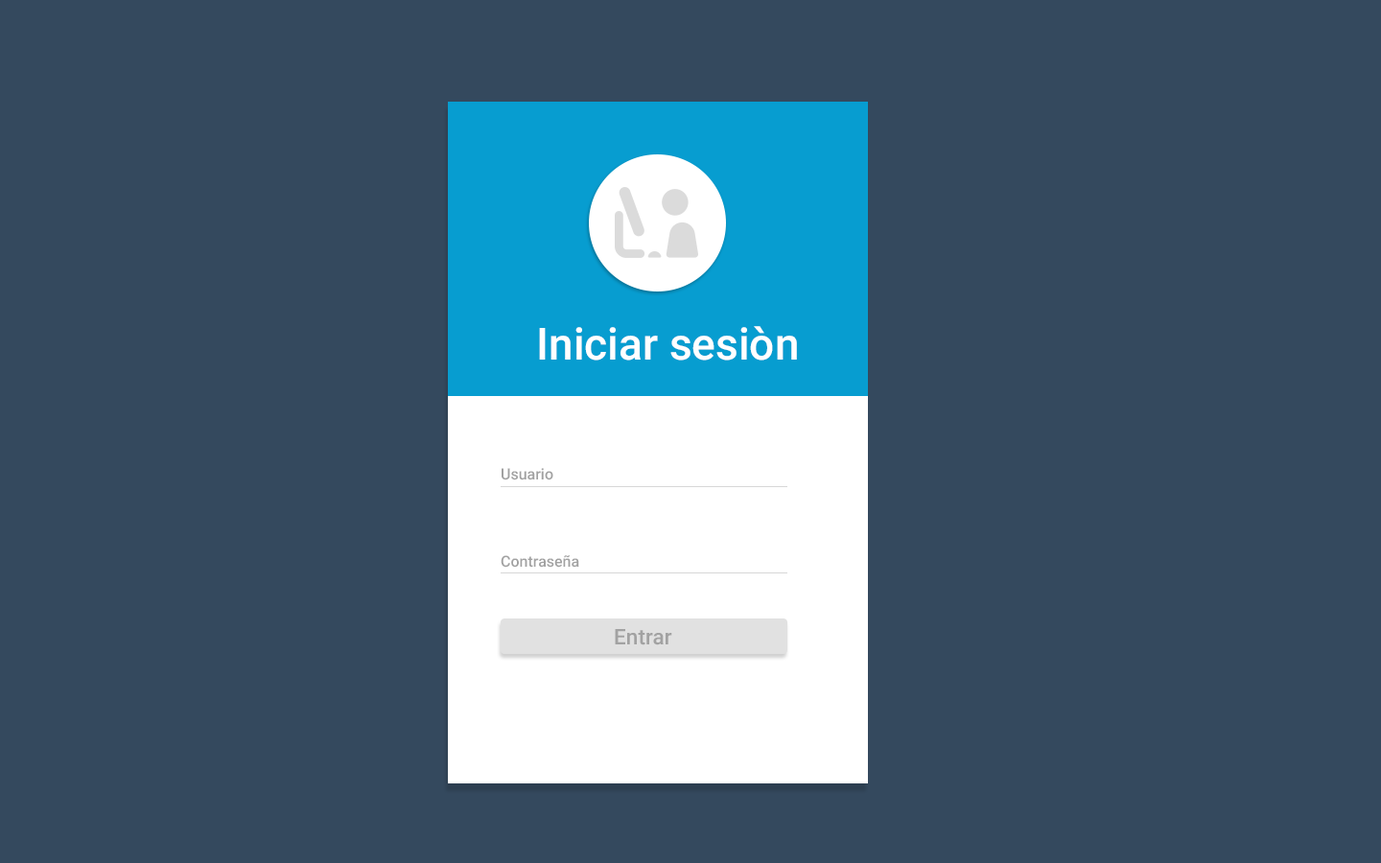
<style>
.page{position:relative;width:1381px;height:863px;background:#34495e}
.page>*{position:absolute;margin:0}
.t1{font:44.3px "Roboto-Medium";color:#ffffff}
.t2{font:15.3px "Roboto-Medium";color:#a2a2a2}
.t3{font:21.7px "Roboto-Medium";color:#a2a2a2}
</style>
<div class="page">
<p class="t1" style="left:539px;top:326px;width:258px;height:35px">Iniciar sesiòn</p>
<p class="t2" style="left:502px;top:468px;width:51px;height:13px">Usuario</p>
<p class="t2" style="left:501px;top:555px;width:78px;height:13px">Contraseña</p>
<p class="t3" style="left:615px;top:629px;width:57px;height:17px">Entrar</p>
</div>
